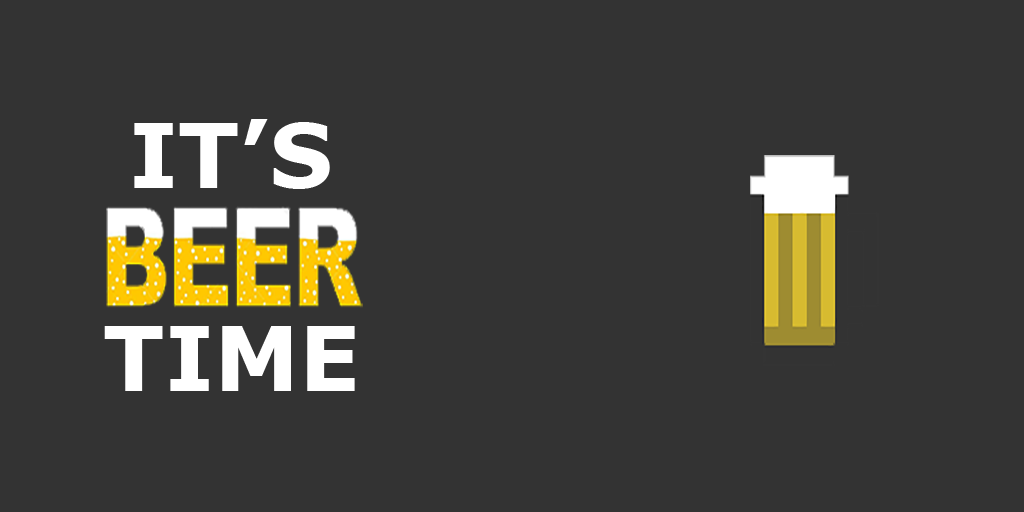
<style>
.page{position:relative;width:1024px;height:512px;background:#333333}
.page>*{position:absolute;margin:0}
.t1{font:90px "Verdana-Bold";color:#ffffff}
</style>
<div class="page">
<p class="t1" style="left:134px;top:119px;width:196px;height:70px">IT’S</p>
<p class="t1" style="left:104px;top:326px;width:251px;height:65px">TIME</p>
</div>
